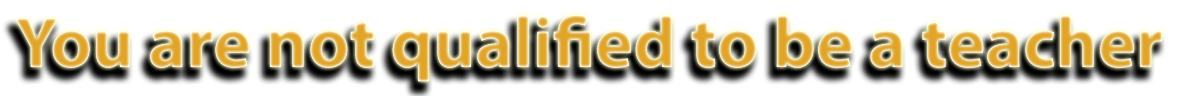
<style>
.page{position:relative;width:1178px;height:96px;background:#ffffff}
.page>*{position:absolute;margin:0}
.t1{font:72px "MyriadPro-Bold"}
</style>
<div class="page">
<p class="t1" style="left:15px;top:15px;width:1147px;height:67px">You are not qualified to be a teacher</p>
</div>
